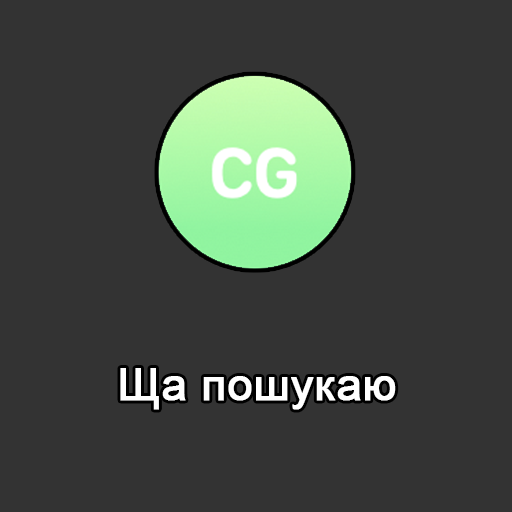
<style>
.page{position:relative;width:512px;height:512px;background:#333333}
.page>*{position:absolute;margin:0}
.t1{font:45px "ArialMT";color:#ffffff;font-weight:bold}
</style>
<div class="page">
<p class="t1" style="left:120px;top:368px;width:276px;height:42px">Ща пошукаю</p>
</div>
